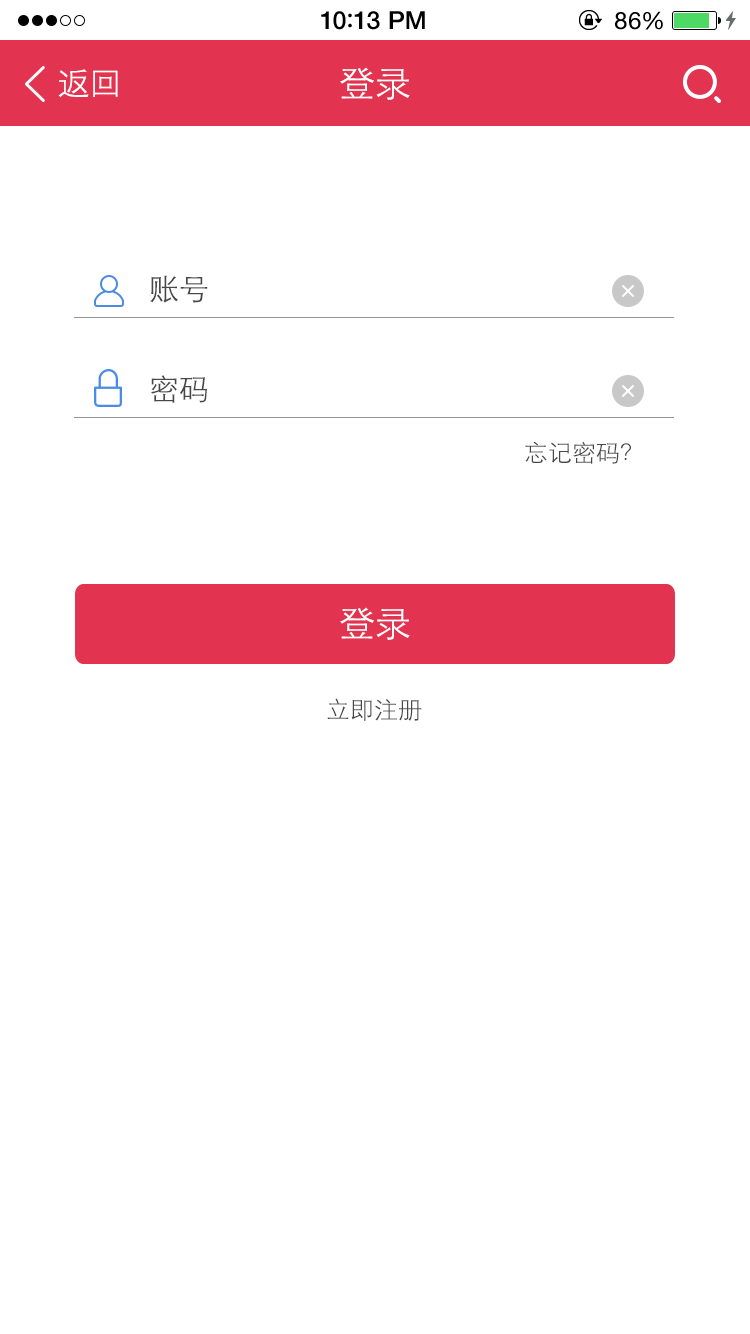
<style>
.page{position:relative;width:750px;height:1334px;background:#ffffff}
.page>*{position:absolute;margin:0}
.t1{font:25px "HelveticaNeue-Medium";letter-spacing:0.015em;color:#000000}
.t2{font:25px "ArialRoundedMTBold";letter-spacing:0.015em;color:#000000}
.t3{font:24px "HelveticaNeue";letter-spacing:0.03em;color:#000000}
.t4{font:33px "STXihei";color:#ffffff}
.t5{font:36px "STXihei";color:#ffffff}
.t6{font:30px "STXihei";color:#474749}
.t7{font:24px "STXihei";color:#474749}
.t8{font:24px "STXihei";color:#48484a}
</style>
<div class="page">
<p class="t1" style="left:321px;top:11px;width:104px;height:19px">10<span class="t2">:</span>13 PM</p>
<p class="t3" style="left:615px;top:11px;width:48px;height:19px">86%</p>
<p class="t4" style="left:58px;top:69px;width:60px;height:29px">返回</p>
<p class="t5" style="left:340px;top:67px;width:70px;height:33px">登录</p>
<p class="t6" style="left:150px;top:275px;width:58px;height:28px">账号</p>
<p class="t6" style="left:150px;top:375px;width:57px;height:28px">密码</p>
<p class="t7" style="left:525px;top:441px;width:106px;height:23px">忘记密码？</p>
<p class="t5" style="left:340px;top:607px;width:70px;height:33px">登录</p>
<p class="t8" style="left:327px;top:698px;width:95px;height:23px">立即注册</p>
</div>
